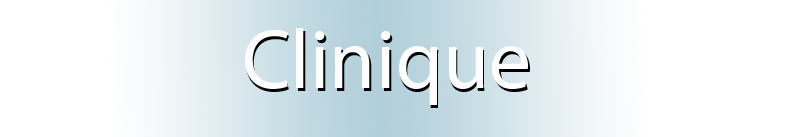
<style>
.page{position:relative;width:800px;height:137px;background:#ffffff}
.page>*{position:absolute;margin:0}
.t1{font:84.2px "MyriadPro-Regular";color:#fffefe}
.t2{font:84.2px "MyriadPro-Regular"}
</style>
<div class="page">
<p class="t1" style="left:245px;top:28px;width:283px;height:77px">Clinique</p>
<p class="t2" style="left:246px;top:31px;width:284px;height:77px">Clinique</p>
</div>
